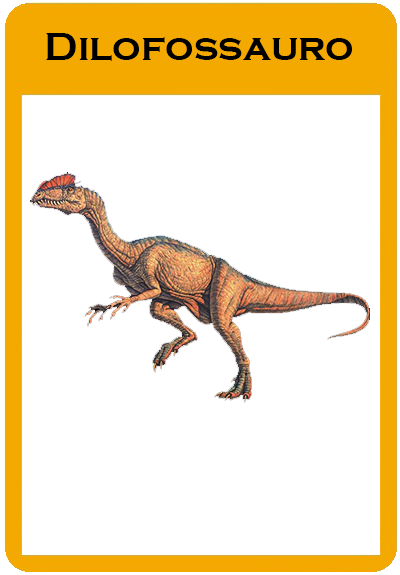
<style>
.page{position:relative;width:400px;height:575px;background:#ffffff}
.page>*{position:absolute;margin:0}
.t1{font:40px "CopperplateGothic-Bold";color:#000000}
</style>
<div class="page">
<p class="t1" style="left:46px;top:33px;width:306px;height:28px">Dilofossauro</p>
</div>
